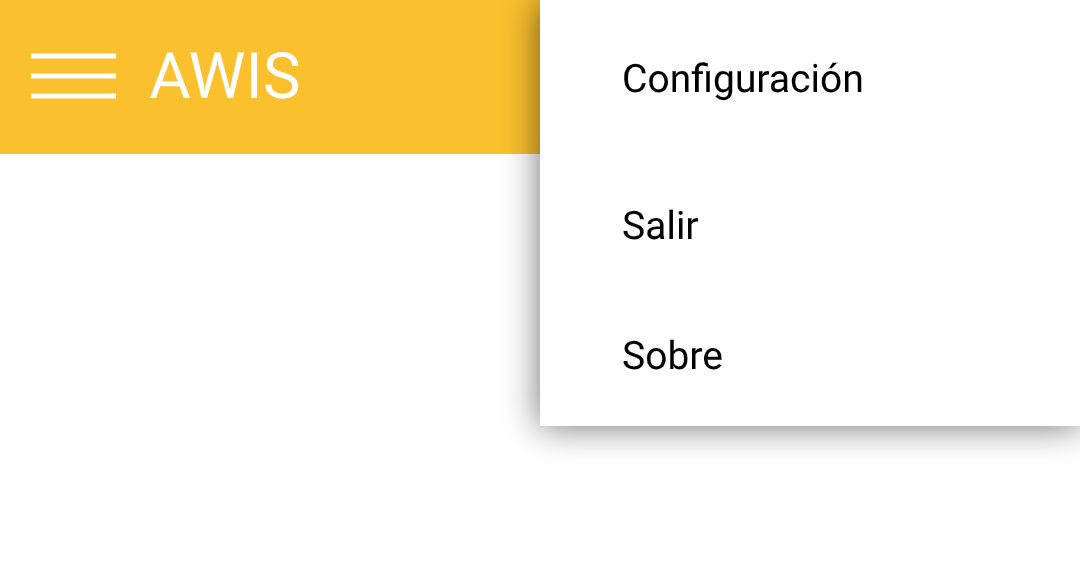
<style>
.page{position:relative;width:1080px;height:577px;background:#ffffff}
.page>*{position:absolute;margin:0}
.t1{font:64px "Roboto-Regular";color:#ffffff}
.t2{font:39.1px "Roboto-Regular";color:#000000}
</style>
<div class="page">
<p class="t1" style="left:149px;top:51px;width:150px;height:48px">AWIS</p>
<p class="t2" style="left:624px;top:62px;width:238px;height:39px">Configuración</p>
<p class="t2" style="left:623px;top:209px;width:76px;height:31px">Salir</p>
<p class="t2" style="left:623px;top:339px;width:99px;height:31px">Sobre</p>
</div>
